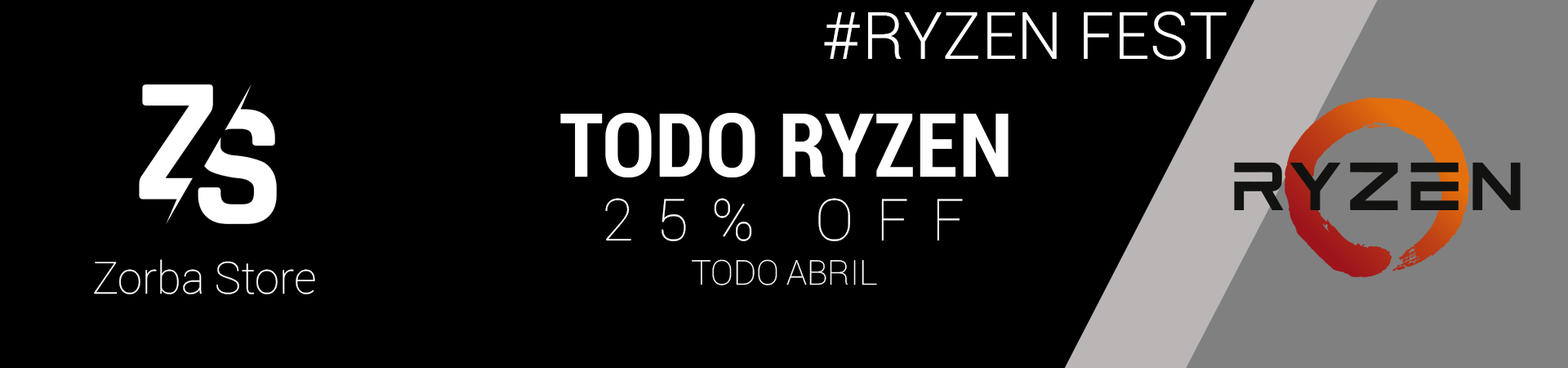
<style>
.page{position:relative;width:1568px;height:368px;background:#000000}
.page>*{position:absolute;margin:0}
.t1{font:64.7px "Roboto-Light";color:#ffffff}
.t2{font:88.5px "Roboto-BoldCondensed";color:#ffffff}
.t3{font:57.9px "Roboto-Thin";letter-spacing:0.4em;color:#ffffff}
.t4{font:44.2px "Roboto-Thin";color:#ffffff}
.t5{font:34.1px "Roboto-Thin";color:#ffffff}
</style>
<div class="page">
<p class="t1" style="left:824px;top:11px;width:403px;height:49px">#RYZEN FEST</p>
<p class="t2" style="left:560px;top:113px;width:449px;height:64px">TODO RYZEN</p>
<p class="t3" style="left:605px;top:198px;width:358px;height:43px">25% OFF</p>
<p class="t4" style="left:94px;top:259px;width:221px;height:35px">Zorba Store</p>
<p class="t5" style="left:692px;top:259px;width:185px;height:26px">TODO ABRIL</p>
</div>
